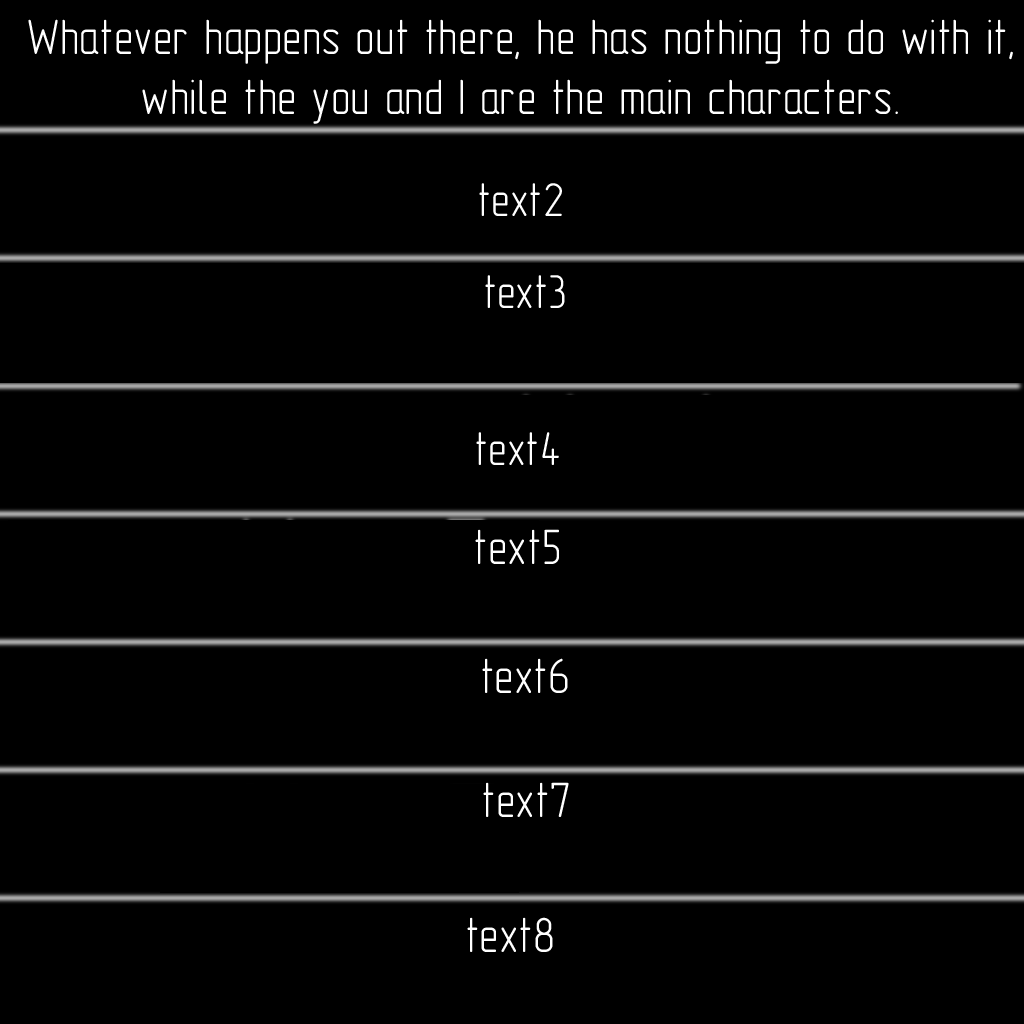
<style>
.page{position:relative;width:1024px;height:1024px;background:#000000}
.page>*{position:absolute;margin:0}
.t1{font:50px "GOST-2.304-81typeA";color:#ffffff}
.t2{font:48px "GOST-2.304-81typeA";color:#ffffff}
</style>
<div class="page">
<p class="t1" style="left:28px;top:19px;width:985px;height:105px;text-align:center">Whatever happens out there, he has nothing to do with it,<br>while the you and I are the main characters.</p>
<p class="t2" style="left:479px;top:183px;width:83px;height:33px">text2</p>
<p class="t2" style="left:485px;top:275px;width:80px;height:33px">text3</p>
<p class="t2" style="left:476px;top:432px;width:83px;height:33px">text4</p>
<p class="t1" style="left:475px;top:529px;width:84px;height:35px">text5</p>
<p class="t1" style="left:482px;top:658px;width:86px;height:35px">text6</p>
<p class="t1" style="left:483px;top:782px;width:86px;height:35px">text7</p>
<p class="t1" style="left:467px;top:917px;width:86px;height:35px">text8</p>
</div>
